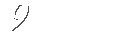
<style>
.page{position:relative;width:128px;height:32px;background:#ffffff}
.page>*{position:absolute;margin:0}
.t1{font:43px "DomDiagonalBT-Regular";letter-spacing:0.075em;color:#ffffff;scale:1.05 1}
</style>
<div class="page">
<p class="t1" style="left:11px;top:2px;width:18px;height:29px">9</p>
</div>
